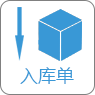
<style>
.page{position:relative;width:95px;height:95px;background:#ffffff}
.page>*{position:absolute;margin:0}
.t1{font:18px "MicrosoftYaHei";color:#3998d6}
</style>
<div class="page">
<p class="t1" style="left:20px;top:67px;width:54px;height:17px">入库单</p>
</div>
